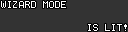
<style>
.page{position:relative;width:128px;height:32px;background:#333333}
.page>*{position:absolute;margin:0}
.t1{font:10px "Terminal";color:#ffffff}
</style>
<div class="page">
<p class="t1" style="left:1px;top:1px;width:65px;height:7px">WIZARD MODE</p>
<p class="t1" style="left:88px;top:24px;width:39px;height:7px">IS LIT!</p>
</div>
